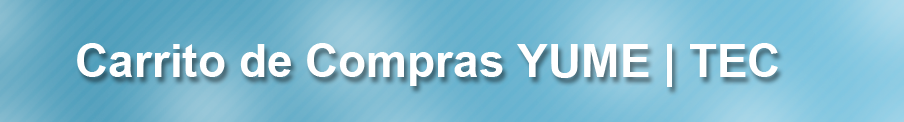
<style>
.page{position:relative;width:904px;height:122px}
.page>*{position:absolute;margin:0}
.t1{font:46px "Arial-BoldMT";color:#ffffff}
</style>
<div class="page">
<p class="t1" style="left:77px;top:43px;width:701px;height:44px">Carrito de Compras YUME | TEC</p>
</div>
